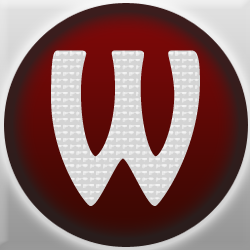
<style>
.page{position:relative;width:250px;height:250px}
.page>*{position:absolute;margin:0}
.t1{font:180px "HoboStd";color:#d4d4d4;font-weight:bold}
</style>
<div class="page">
<p class="t1" style="left:51px;top:50px;width:149px;height:156px">W</p>
</div>
